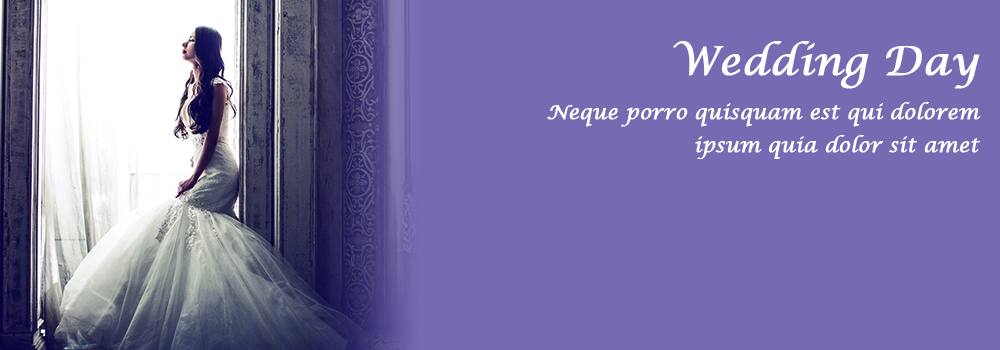
<style>
.page{position:relative;width:1000px;height:350px;background:#756bb2}
.page>*{position:absolute;margin:0}
.t1{font:40px "LucidaCalligraphy-Italic";color:#ffffff;font-weight:bold}
.t2{font:20px/33px "LucidaCalligraphy-Italic";color:#ffffff;font-weight:bold}
</style>
<div class="page">
<p class="t1" style="left:673px;top:41px;width:307px;height:48px">Wedding Day</p>
<p class="t2" style="left:547px;top:102px;width:434px;height:57px;text-align:right">Neque porro quisquam est qui dolorem<br>ipsum quia dolor sit amet</p>
</div>
